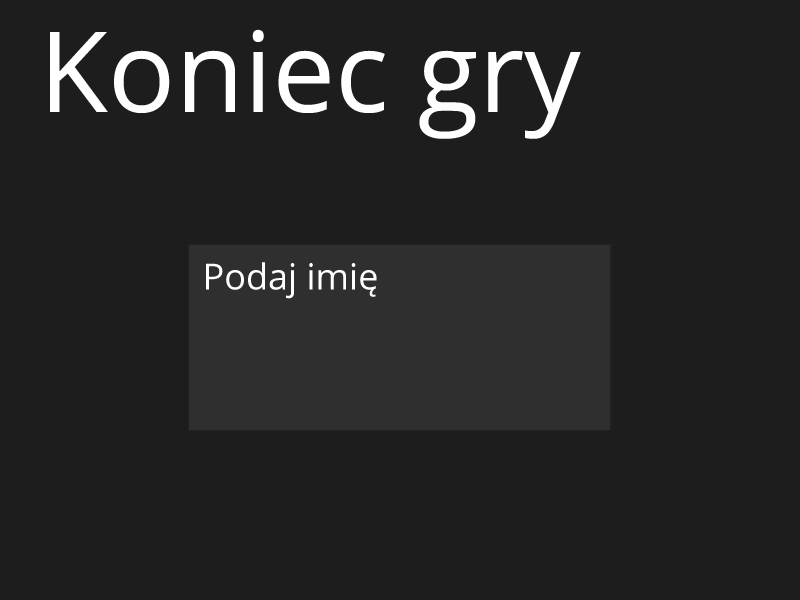
<style>
.page{position:relative;width:800px;height:600px;background:#1d1d1d}
.page>*{position:absolute;margin:0}
.t1{font:111.8px "OpenSans";color:#ffffff}
.t2{font:36px "OpenSans";color:#ffffff}
</style>
<div class="page">
<p class="t1" style="left:50px;top:29px;width:531px;height:110px">Koniec gry</p>
<p class="t2" style="left:206px;top:262px;width:171px;height:37px">Podaj imię</p>
</div>
